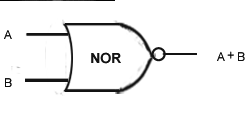
<style>
.page{position:relative;width:250px;height:115px;background:#ffffff}
.page>*{position:absolute;margin:0}
.t1{font:12px "ArialMT";color:#131313}
.t2{font:14px "Arial-BoldMT";color:#131313}
.t3{font:14px "ArialMT";color:#0d0d0d;scale:0.87 1}
.t4{font:12px "ArialMT";color:#0d0d0d}
</style>
<div class="page">
<p class="t1" style="left:4px;top:30px;width:8px;height:9px">A</p>
<p class="t2" style="left:91px;top:52px;width:30px;height:12px">NOR</p>
<p class="t1" style="left:217px;top:52px;width:8px;height:9px">A</p>
<p class="t3" style="left:227px;top:51px;width:7px;height:8px">+</p>
<p class="t1" style="left:238px;top:52px;width:7px;height:9px">B</p>
<p class="t4" style="left:5px;top:78px;width:7px;height:9px">B</p>
</div>
